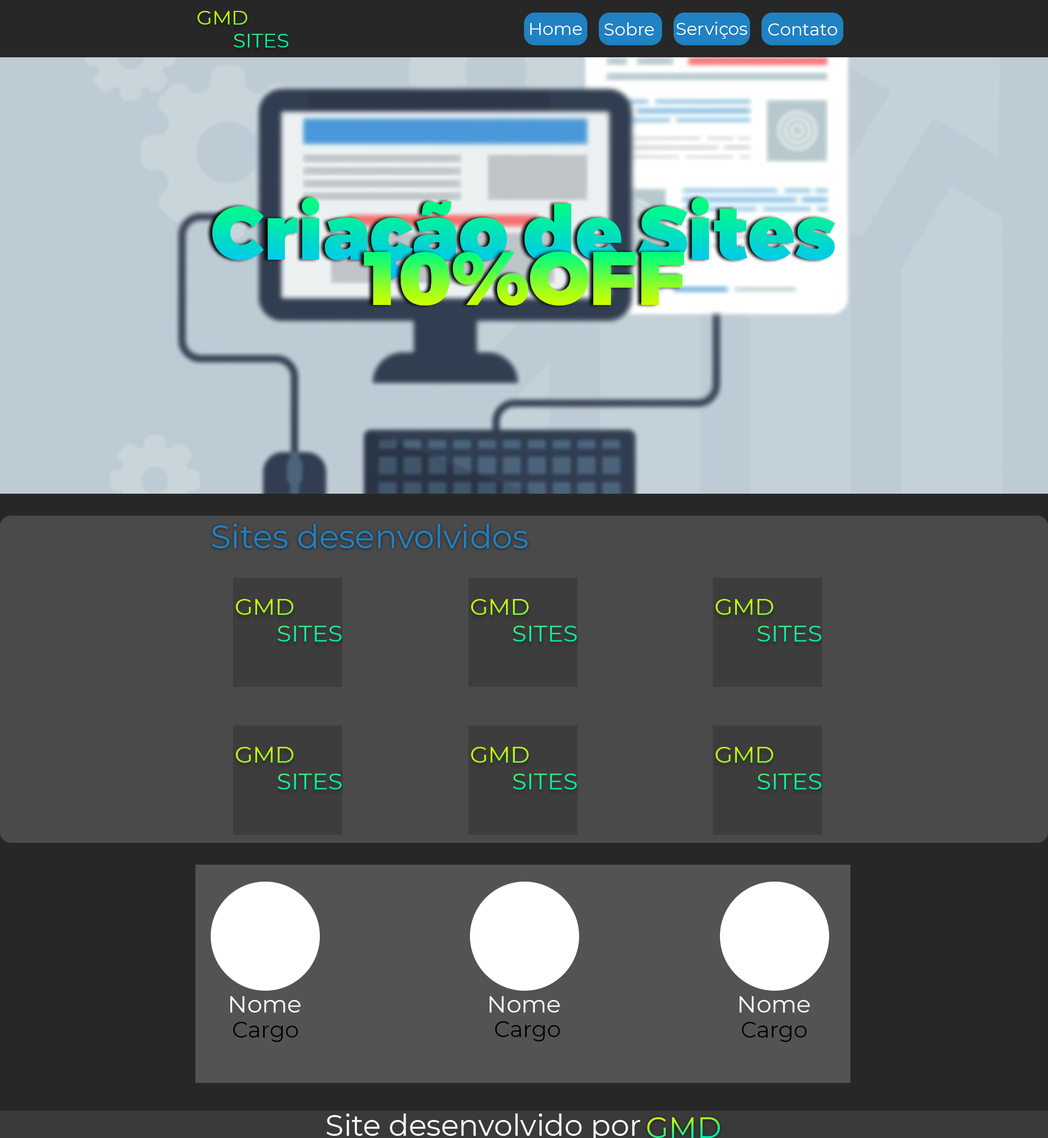
<style>
.page{position:relative;width:1048px;height:1138px;background:#4a4a4a}
.page>*{position:absolute;margin:0}
.t1{font:19.2px "Montserrat-Regular";scale:1.06 1}
.t2{font:17.5px "Montserrat-Regular";color:#ffffff}
.t3{font:32.7px "Montserrat-Regular";color:#2081c3}
.t4{font:22.2px "Montserrat-Regular";scale:1.06 1}
.t5{font:23.8px "Montserrat-Regular";color:#ffffff}
.t6{font:22.3px "Montserrat-Regular";color:#000000}
.t7{font:29.5px "Montserrat-Regular"}
</style>
<div class="page">
<p class="t1" style="left:197px;top:11px;width:92px;height:36px">GMD<br>   SITES</p>
<p class="t2" style="left:530px;top:23px;width:52px;height:12px">Home</p>
<p class="t2" style="left:604px;top:22px;width:50px;height:13px">Sobre</p>
<p class="t2" style="left:676px;top:22px;width:71px;height:17px">Serviços</p>
<p class="t2" style="left:768px;top:23px;width:69px;height:12px">Contato</p>
<p class="t3" style="left:212px;top:524px;width:316px;height:24px">Sites desenvolvidos</p>
<p class="t4" style="left:236px;top:599px;width:106px;height:43px">GMD<br>   SITES</p>
<p class="t4" style="left:471px;top:599px;width:106px;height:43px">GMD<br>   SITES</p>
<p class="t4" style="left:715px;top:599px;width:106px;height:43px">GMD<br>   SITES</p>
<p class="t4" style="left:236px;top:747px;width:106px;height:43px">GMD<br>   SITES</p>
<p class="t4" style="left:471px;top:747px;width:106px;height:43px">GMD<br>   SITES</p>
<p class="t4" style="left:715px;top:747px;width:106px;height:43px">GMD<br>   SITES</p>
<p class="t5" style="left:230px;top:996px;width:71px;height:17px">Nome</p>
<p class="t5" style="left:489px;top:996px;width:71px;height:17px">Nome</p>
<p class="t5" style="left:739px;top:996px;width:71px;height:17px">Nome</p>
<p class="t6" style="left:233px;top:1022px;width:65px;height:20px">Cargo</p>
<p class="t6" style="left:495px;top:1021px;width:65px;height:21px">Cargo</p>
<p class="t6" style="left:742px;top:1022px;width:64px;height:20px">Cargo</p>
<p class="t7" style="left:647px;top:1117px;width:73px;height:21px">GMD</p>
</div>
